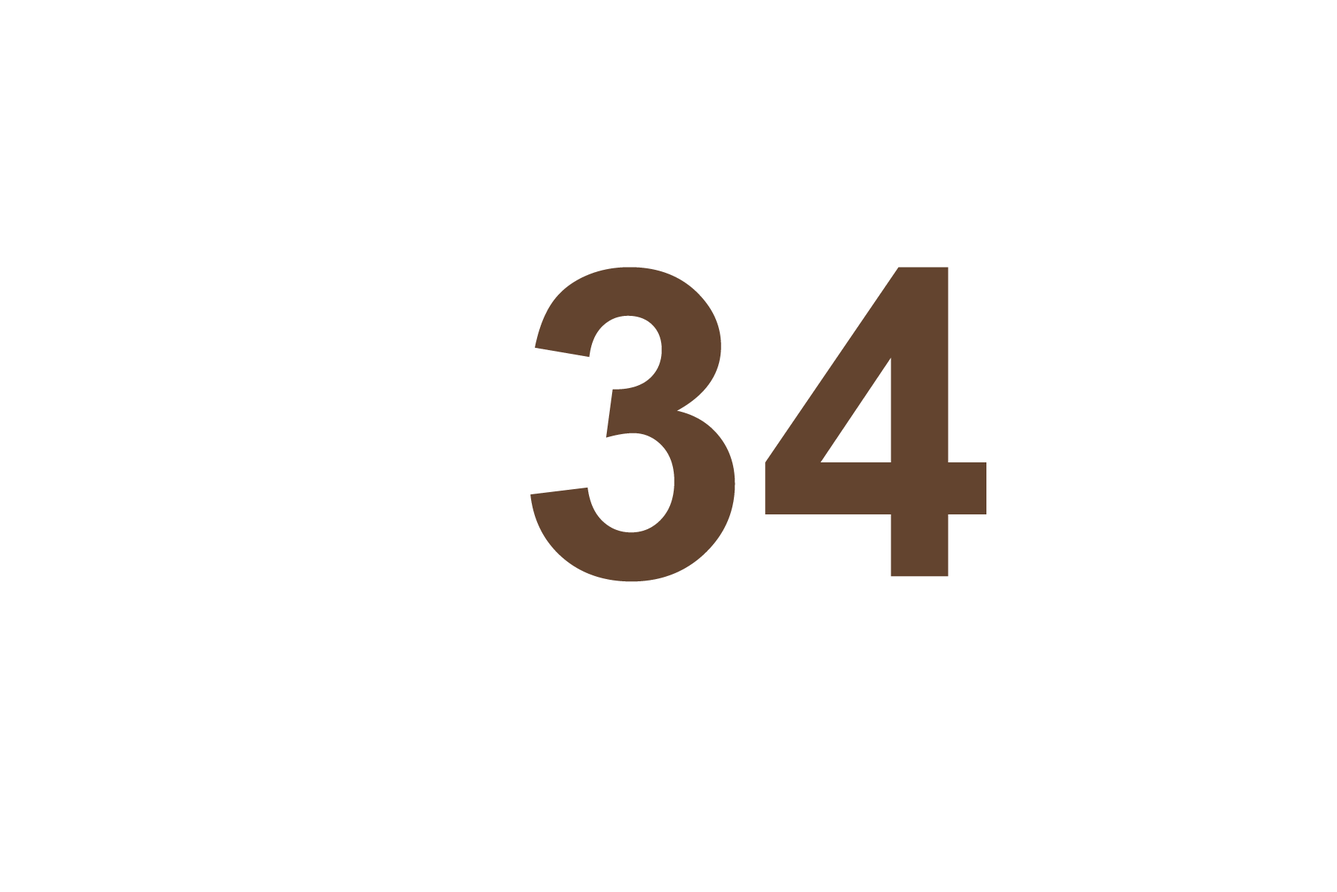
<style>
.page{position:relative;width:1337px;height:892px;background:#ffffff}
.page>*{position:absolute;margin:0}
.t1{font:429.6px "Arial-BoldMT";color:#63442f}
</style>
<div class="page">
<p class="t1" style="left:531px;top:267px;width:456px;height:315px">34</p>
</div>
